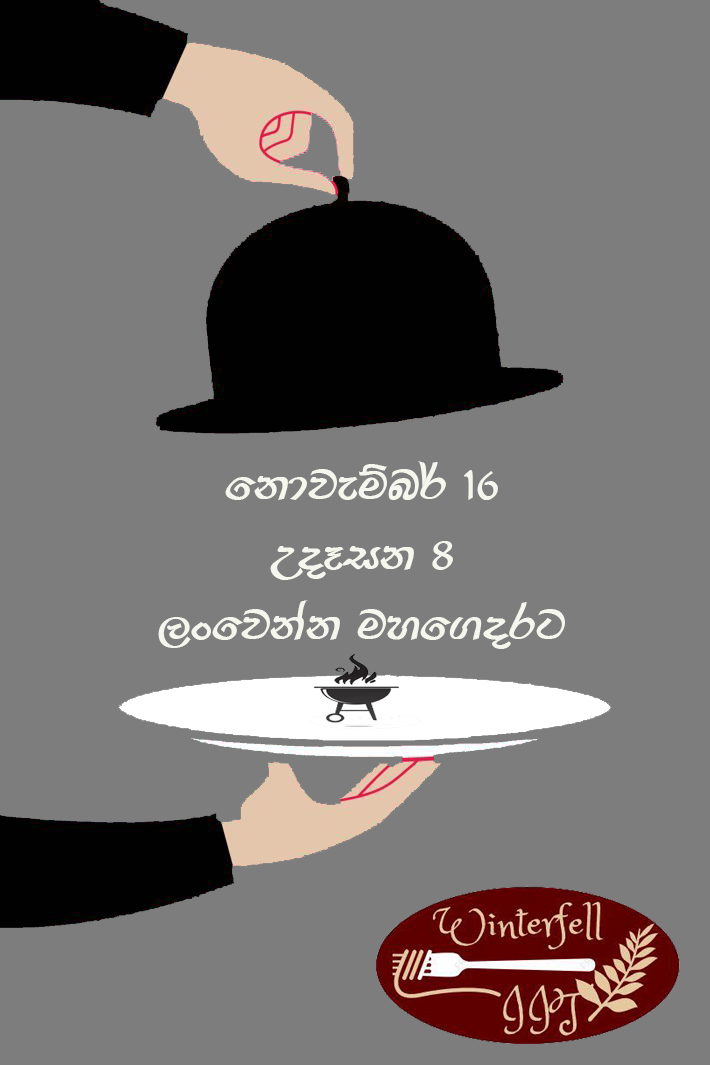
<style>
.page{position:relative;width:710px;height:1065px;background:#7d7d7d}
.page>*{position:absolute;margin:0}
.t1{font:58.3px "FMDeranax";color:#f5f6ee;scale:1.17 1}
</style>
<div class="page">
<p class="t1" style="left:158px;top:461px;width:407px;height:188px;text-align:center">fkdjeïn¾ 16<br>WoEik 8<br>,xfjkak uyf.org</p>
</div>
